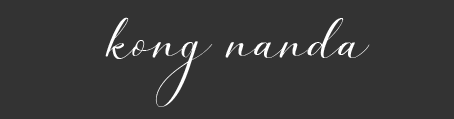
<style>
.page{position:relative;width:454px;height:119px;background:#333333}
.page>*{position:absolute;margin:0}
.t1{font:72px "SimpleMonologueDEMO-Regular";color:#ffffff}
</style>
<div class="page">
<p class="t1" style="left:105px;top:17px;width:265px;height:90px">kong nanda</p>
</div>
